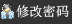
<style>
.page{position:relative;width:72px;height:24px;background:#333333}
.page>*{position:absolute;margin:0}
.t1{font:13.3px "SimSun"}
</style>
<div class="page">
<p class="t1" style="left:16px;top:5px;width:53px;height:13px">修改密码</p>
</div>
